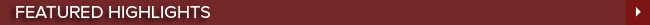
<style>
.page{position:relative;width:650px;height:25px;background:#742729}
.page>*{position:absolute;margin:0}
.t1{font:18px "ProximaNova-Regular";color:#ffffff}
</style>
<div class="page">
<p class="t1" style="left:16px;top:6px;width:194px;height:12px">FEATURED HIGHLIGHTS</p>
</div>
